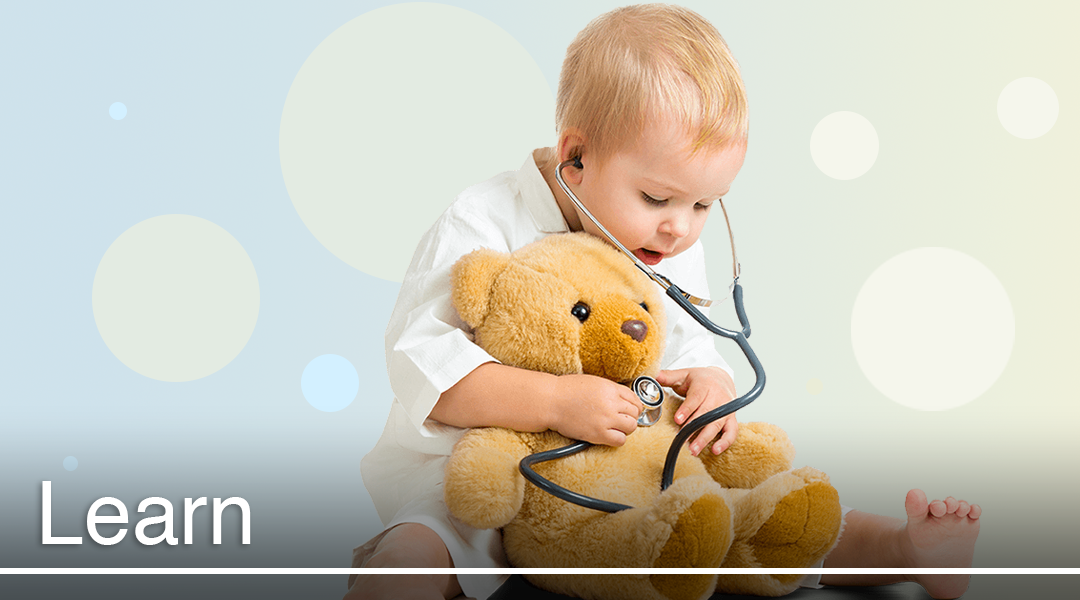
<style>
.page{position:relative;width:1080px;height:600px}
.page>*{position:absolute;margin:0}
.t1{font:87.4px "Helvetica";color:#ffffff}
</style>
<div class="page">
<p class="t1" style="left:42px;top:481px;width:209px;height:64px">Learn</p>
</div>
